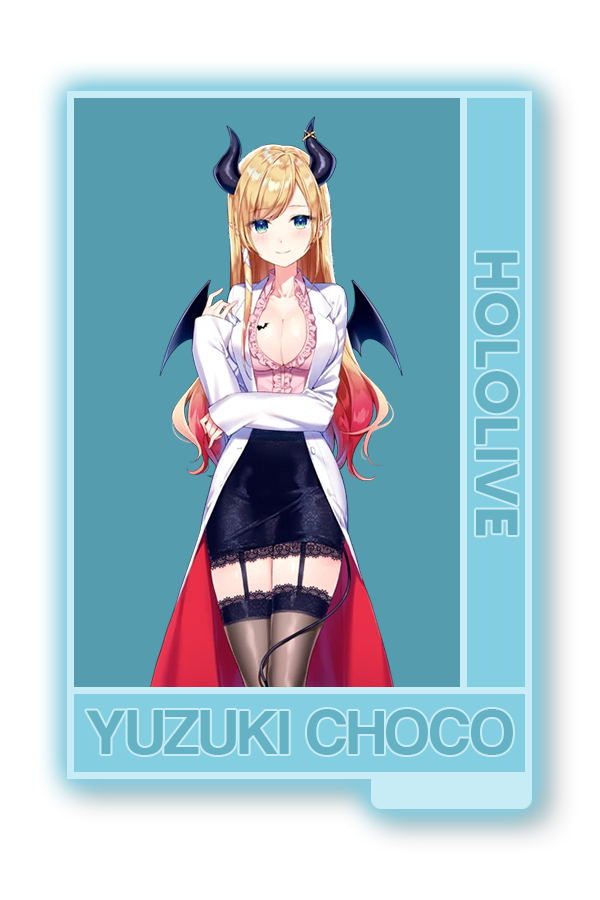
<style>
.page{position:relative;width:600px;height:900px;background:#549cae}
.page>*{position:absolute;margin:0}
.t1{font:59.2px "MADETOMMY-Bold";color:#66b2c5}
.t2{font:65.9px "CoolveticaRg-Regular";color:#66b2c5}
</style>
<div class="page">
<p class="t1" style="left:475px;top:252px;width:44px;height:284px;rotate:90deg">HOLOLIVE</p>
<p class="t2" style="left:86px;top:709px;width:427px;height:46px">YUZUKI CHOCO</p>
</div>
